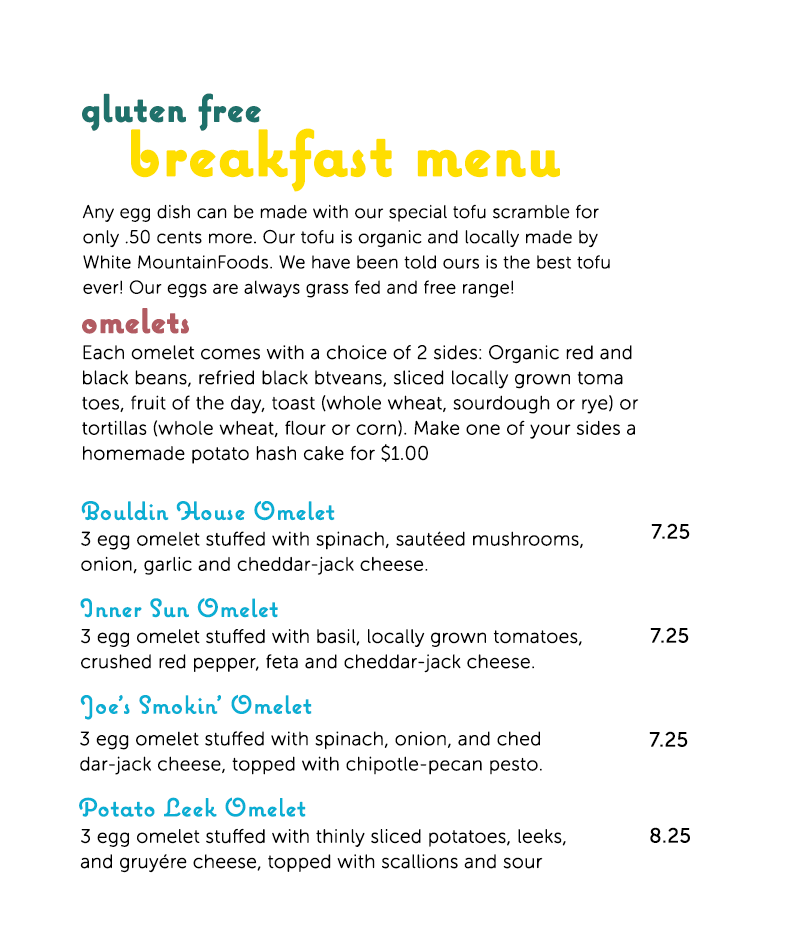
<style>
.page{position:relative;width:792px;height:930px;background:#ffffff}
.page>*{position:absolute;margin:0}
.t1{font:38px "Coquette-Bold";letter-spacing:0.01em;color:#1f716b;font-weight:bold}
.t2{font:64px "Coquette-Bold";letter-spacing:0.01em;color:#ffde00;font-weight:bold}
.t3{font:18px/25.2px "MuseoSansRounded-100";letter-spacing:0.01em;color:#000000;font-weight:bold}
.t4{font:34px "Coquette-Bold";letter-spacing:0.01em;color:#b25b62;font-weight:bold}
.t5{font:19px/25.2px "MuseoSansRounded-100";letter-spacing:0.01em;color:#000000;font-weight:bold}
.t6{font:25px "Coquette";letter-spacing:0.01em;color:#0aaed3;font-weight:bold}
.t7{font:20px "MuseoSans-300";letter-spacing:0.01em;color:#000000;font-weight:bold}
</style>
<div class="page">
<p class="t1" style="left:82px;top:93px;width:179px;height:38px">gluten free</p>
<p class="t2" style="left:131px;top:128px;width:429px;height:64px">breakfast menu</p>
<p class="t3" style="left:82px;top:204px;width:528px;height:94px">Any egg dish can be made with our special tofu scramble for<br>only .50 cents more. Our tofu is organic and locally made by<br>White MountainFoods. We have been told ours is the best tofu<br>ever! Our eggs are always grass fed and free range!</p>
<p class="t4" style="left:82px;top:308px;width:107px;height:26px">omelets</p>
<p class="t5" style="left:82px;top:345px;width:557px;height:119px">Each omelet comes with a choice of 2 sides: Organic red and<br>black beans, refried black btveans, sliced locally grown toma<br>toes, fruit of the day, toast (whole wheat, sourdough or rye) or<br>tortillas (whole wheat, flour or corn). Make one of your sides a<br>homemade potato hash cake for $1.00</p>
<p class="t6" style="left:81px;top:501px;width:254px;height:20px">Bouldin House Omelet</p>
<p class="t5" style="left:81px;top:531px;width:502px;height:44px">3 egg omelet stuffed with spinach, sautéed mushrooms,<br>onion, garlic and cheddar-jack cheese.</p>
<p class="t7" style="left:651px;top:523px;width:39px;height:16px">7.25</p>
<p class="t6" style="left:80px;top:598px;width:198px;height:20px">Inner Sun Omelet</p>
<p class="t5" style="left:81px;top:629px;width:501px;height:44px">3 egg omelet stuffed with basil, locally grown tomatoes,<br>crushed red pepper, feta and cheddar-jack cheese.</p>
<p class="t7" style="left:650px;top:627px;width:39px;height:16px">7.25</p>
<p class="t6" style="left:80px;top:694px;width:232px;height:26px">Joe's Smokin' Omelet</p>
<p class="t5" style="left:80px;top:731px;width:462px;height:44px">3 egg omelet stuffed with spinach, onion, and ched<br>dar-jack cheese, topped with chipotle-pecan pesto.</p>
<p class="t7" style="left:649px;top:731px;width:39px;height:16px">7.25</p>
<p class="t6" style="left:79px;top:797px;width:227px;height:20px">Potato Leek Omelet</p>
<p class="t5" style="left:80px;top:828px;width:486px;height:45px">3 egg omelet stuffed with thinly sliced potatoes, leeks,<br>and gruyére cheese, topped with scallions and sour</p>
<p class="t7" style="left:650px;top:827px;width:40px;height:16px">8.25</p>
</div>
